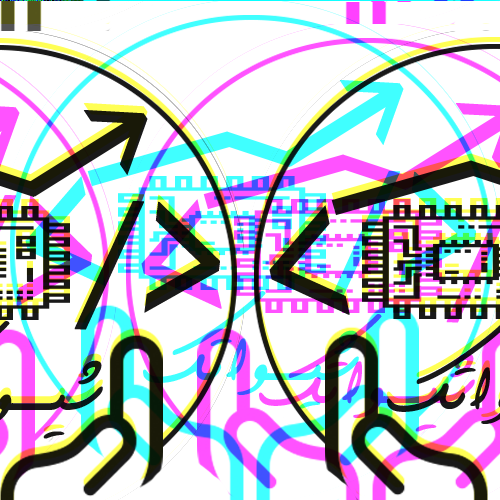
<style>
.page{position:relative;width:500px;height:500px;background:#ffffff}
.page>*{position:absolute;margin:0}
.t1{font:192.4px "AgencyFB-Reg";color:#40ffff}
.t2{font:169.5px "AgencyFB-Reg"}
.t3{font:276.3px "AgencyFB-Reg"}
.t4{font:100px "Mj_Sayeh-2-"}
</style>
<div class="page">
<p class="t1" style="left:339px;top:79px;width:65px;height:65px;rotate:-34deg">&lt;</p>
<p class="t2" style="left:330px;top:170px;width:70px;height:129px;rotate:2deg">/</p>
<p class="t3" style="left:400px;top:170px;width:76px;height:112px;rotate:7deg">&lt;</p>
<p class="t3" style="left:25px;top:175px;width:81px;height:110px;rotate:167deg">&lt;</p>
<p class="t4" style="left:143px;top:290px;width:216px;height:118px">شیـــواتک</p>
</div>
